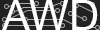
<style>
.page{position:relative;width:100px;height:30px;background:#222222}
.page>*{position:absolute;margin:0}
.t1{font:41.4px "ArialMT";color:#fefefe}
</style>
<div class="page">
<p class="t1" style="left:2px;top:0px;width:96px;height:30px">AWD</p>
</div>
